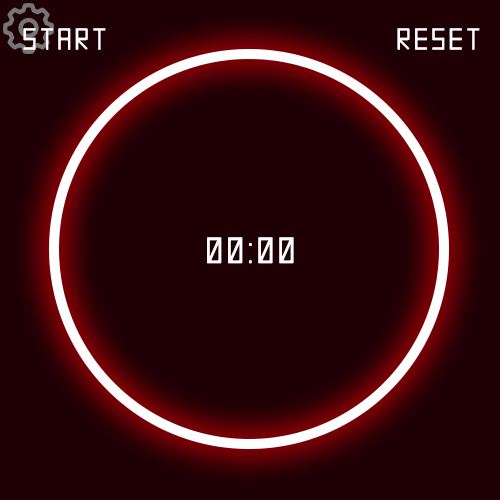
<style>
.page{position:relative;width:500px;height:500px;background:#1e0005}
.page>*{position:absolute;margin:0}
.t1{font:30px "Screaming_Neon";letter-spacing:0.14em;color:#ffffff}
.t2{font:36px "Screaming_Neon";letter-spacing:0.14em;color:#ffffff}
</style>
<div class="page">
<p class="t1" style="left:23px;top:28px;width:83px;height:22px">START</p>
<p class="t1" style="left:397px;top:28px;width:83px;height:22px">RESET</p>
<p class="t2" style="left:207px;top:237px;width:87px;height:27px">00:00</p>
</div>
